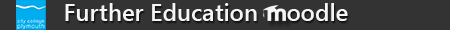
<style>
.page{position:relative;width:450px;height:30px;background:#333333}
.page>*{position:absolute;margin:0}
.t1{font:24px "SegoeUI-Semibold";color:#f5f5f5}
</style>
<div class="page">
<p class="t1" style="left:65px;top:3px;width:283px;height:18px">Further Education    oodle</p>
</div>
